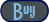
<style>
.page{position:relative;width:49px;height:22px;background:#444d52}
.page>*{position:absolute;margin:0}
.t1{font:30px "FantasticFont";color:#81bbe0}
.t2{font:22px "Pericles";color:#81bbe0}
</style>
<div class="page">
<p class="t1" style="left:13px;top:3px;width:22px;height:17px"><span class="t2">B</span>uy</p>
</div>
